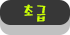
<style>
.page{position:relative;width:70px;height:35px;background:#373737}
.page>*{position:absolute;margin:0}
.t1{font:18px "MagicR-HM";color:#ccff00}
</style>
<div class="page">
<p class="t1" style="left:24px;top:4px;width:22px;height:18px">초급</p>
</div>
